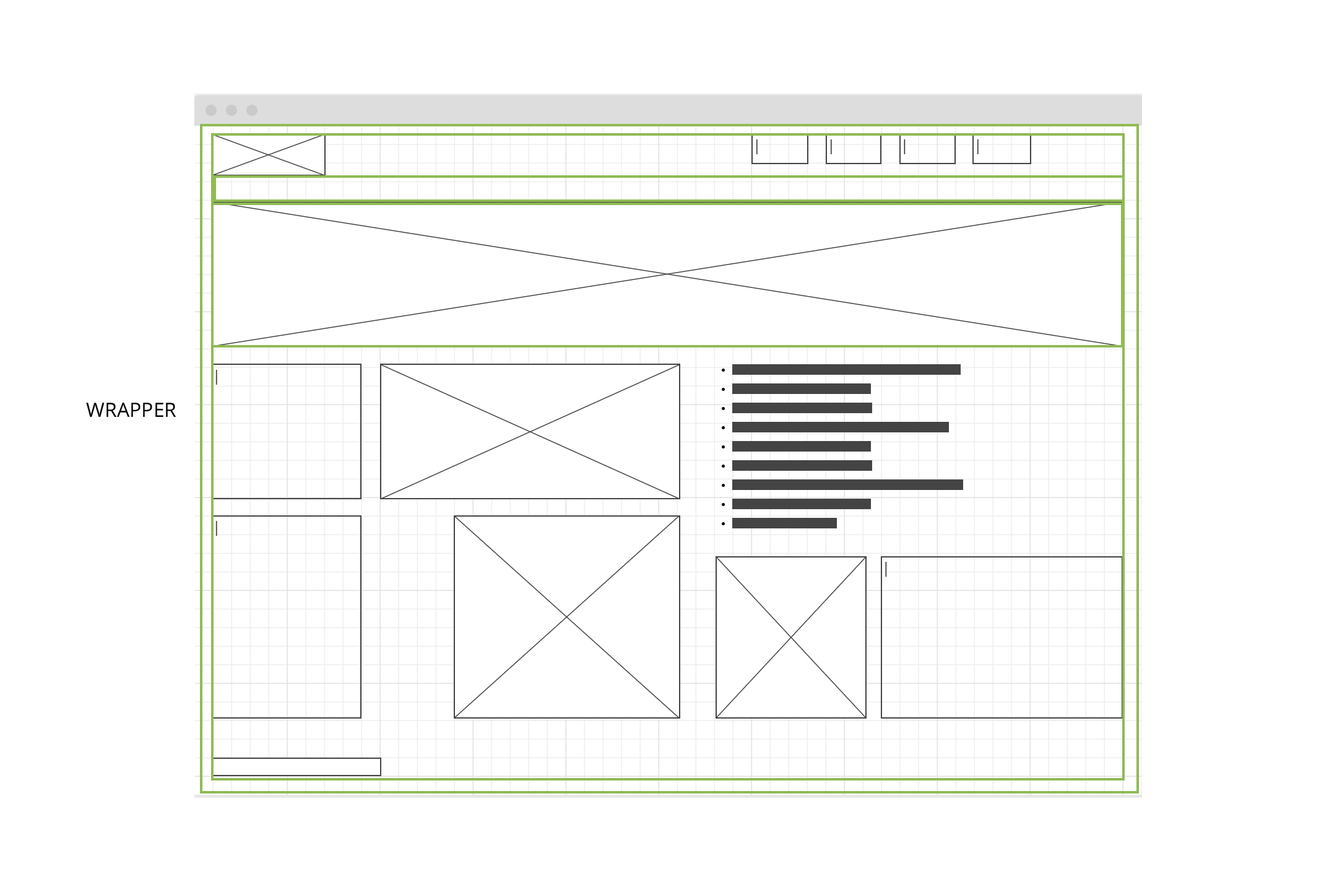
<style>
.page{position:relative;width:1337px;height:892px;background:#ffffff}
.page>*{position:absolute;margin:0}
.t1{font:19.8px "OpenSans";color:#000000}
</style>
<div class="page">
<p class="t1" style="left:86px;top:402px;width:90px;height:15px">WRAPPER</p>
</div>
